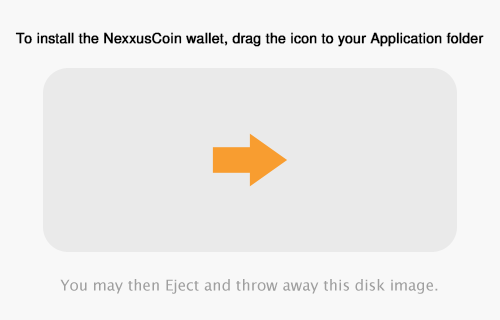
<style>
.page{position:relative;width:500px;height:320px;background:#f8f8f8}
.page>*{position:absolute;margin:0}
.t1{font:14px "FreeSans";color:#000000;font-weight:bold}
</style>
<div class="page">
<p class="t1" style="left:15px;top:32px;width:469px;height:15px">To install the NexxusCoin wallet, drag the icon to your Application folder</p>
</div>
